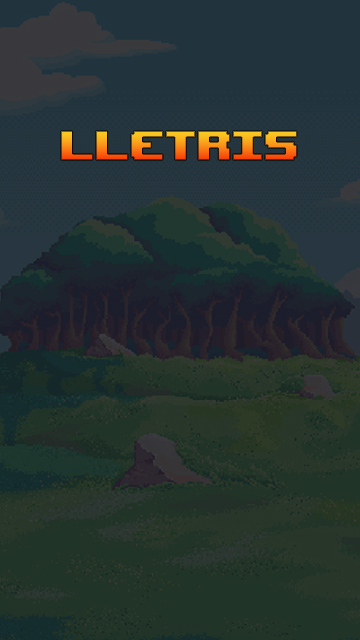
<style>
.page{position:relative;width:360px;height:640px}
.page>*{position:absolute;margin:0}
.t1{font:58.3px "UpheavalTT-BRK-"}
</style>
<div class="page">
<p class="t1" style="left:61px;top:131px;width:236px;height:29px">LLETRIS</p>
</div>
